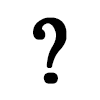
<style>
.page{position:relative;width:100px;height:100px;background:#ffffff}
.page>*{position:absolute;margin:0}
.t1{font:92.4px "YouYuan";color:#000000;font-weight:bold}
</style>
<div class="page">
<p class="t1" style="left:33px;top:17px;width:34px;height:67px">？</p>
</div>
